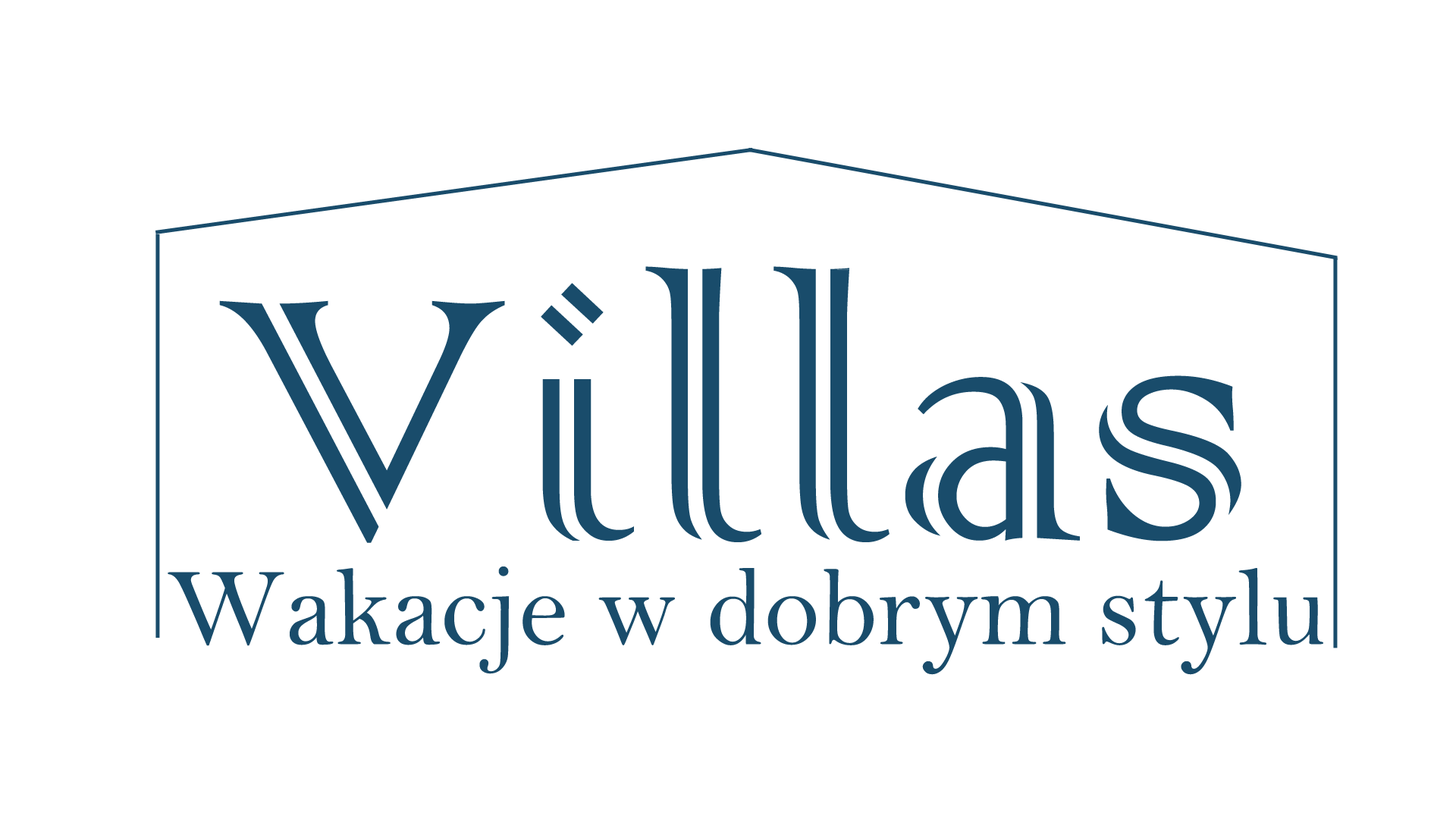
<style>
.page{position:relative;width:1456px;height:819px;background:#ffffff}
.page>*{position:absolute;margin:0}
.t1{font:455px "ColonnaMT";color:#194c6b}
.t2{font:113.7px "BellMT";color:#194c6b}
</style>
<div class="page">
<p class="t1" style="left:219px;top:266px;width:1022px;height:277px">Villas</p>
<p class="t2" style="left:168px;top:566px;width:1155px;height:109px">Wakacje w dobrym stylu</p>
</div>
